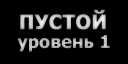
<style>
.page{position:relative;width:128px;height:64px;background:#000000}
.page>*{position:absolute;margin:0}
.t1{font:20px "Tahoma-Bold";color:#c7c7c7;font-weight:bold}
.t2{font:18px "Tahoma-Bold";color:#b6b6b6}
</style>
<div class="page">
<p class="t1" style="left:20px;top:9px;width:86px;height:21px">ПУСТОЙ</p>
<p class="t2" style="left:17px;top:35px;width:93px;height:17px">уровень 1</p>
</div>
